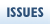
<style>
.page{position:relative;width:50px;height:24px}
.page>*{position:absolute;margin:0}
.t1{font:14px "Humanist521BT-BoldCondensed";color:#2d5078}
</style>
<div class="page">
<p class="t1" style="left:7px;top:7px;width:37px;height:10px">ISSUES</p>
</div>
